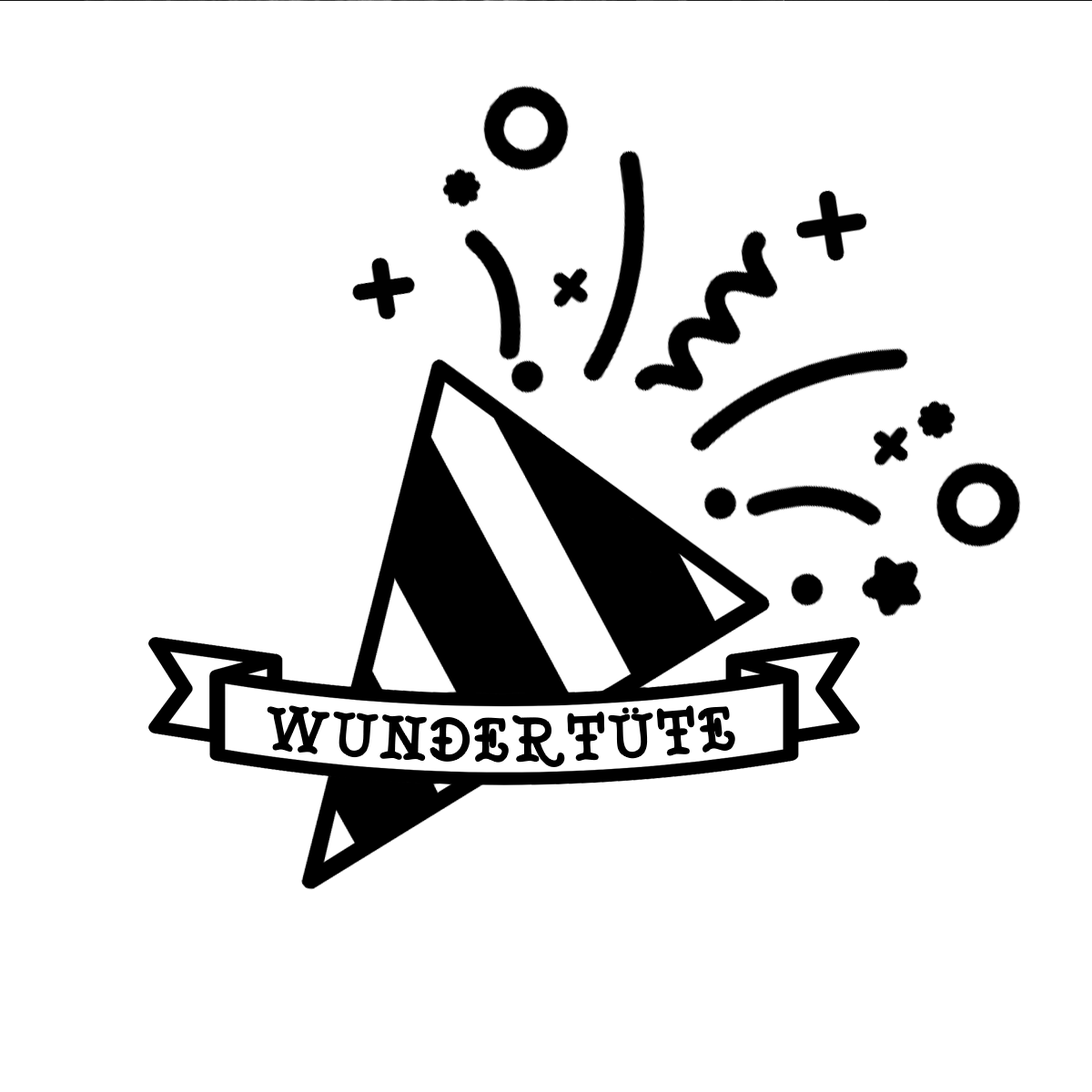
<style>
.page{position:relative;width:1092px;height:1092px;background:#ffffff}
.page>*{position:absolute;margin:0}
.t1{font:60.7px "TattooMuseum";letter-spacing:0.075em;color:#000000}
.t2{font:53.1px "TattooMuseum";letter-spacing:-0.05em;color:#000000}
</style>
<div class="page">
<p class="t1" style="left:268px;top:705px;width:466px;height:60px">WUNDERTuTE</p>
<p class="t2" style="left:622px;top:706px;width:17px;height:7px">..</p>
</div>
